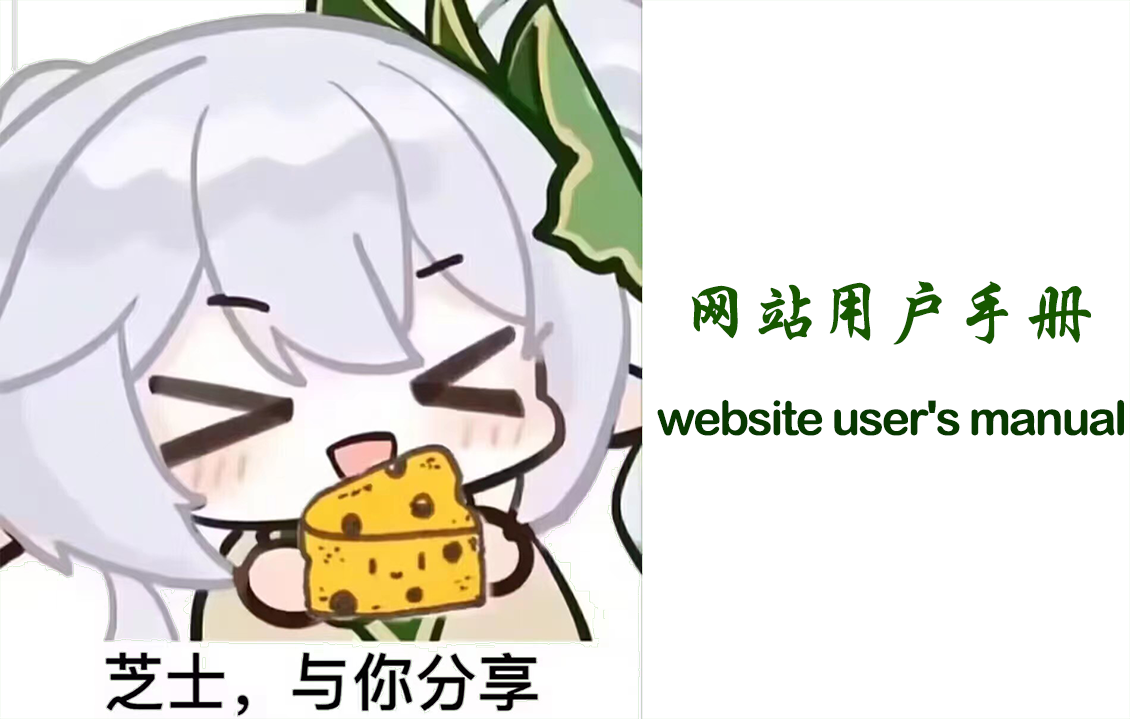
<style>
.page{position:relative;width:1130px;height:719px;background:#ffffff}
.page>*{position:absolute;margin:0}
.t1{font:72px "STXingkai";letter-spacing:-0.05em;color:#175800}
.t2{font:48px "ArialRoundedMTBold";letter-spacing:-0.05em;color:#073800}
</style>
<div class="page">
<p class="t1" style="left:691px;top:281px;width:401px;height:64px">网站用户手册</p>
<p class="t2" style="left:657px;top:399px;width:467px;height:37px">website user's manual</p>
</div>
